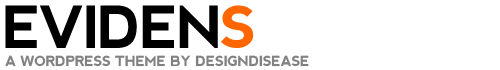
<style>
.page{position:relative;width:500px;height:70px;background:#ffffff}
.page>*{position:absolute;margin:0}
.t1{font:58px "nevis-Bold";letter-spacing:-0.05em;color:#000000;text-transform:uppercase}
.t2{font:58px "nevis-Bold";letter-spacing:-0.05em;color:#ff6600;text-transform:uppercase}
.t3{font:14px "nevis-Bold";letter-spacing:-0.025em;color:#818181;text-transform:uppercase}
</style>
<div class="page">
<p class="t1" style="left:5px;top:5px;width:249px;height:43px">eviden<span class="t2">s</span></p>
<p class="t3" style="left:5px;top:55px;width:304px;height:12px">a WordPress theme by designdisease</p>
</div>
